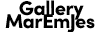
<style>
.page{position:relative;width:100px;height:32px;background:#ffffff}
.page>*{position:absolute;margin:0}
.t1{font:20px "SofiaPro-Black";letter-spacing:-0.03em;color:#000000}
</style>
<div class="page">
<p class="t1" style="left:19px;top:0px;width:65px;height:20px">Gallery</p>
<p class="t1" style="left:5px;top:14px;width:90px;height:19px">MarEmJes</p>
</div>
